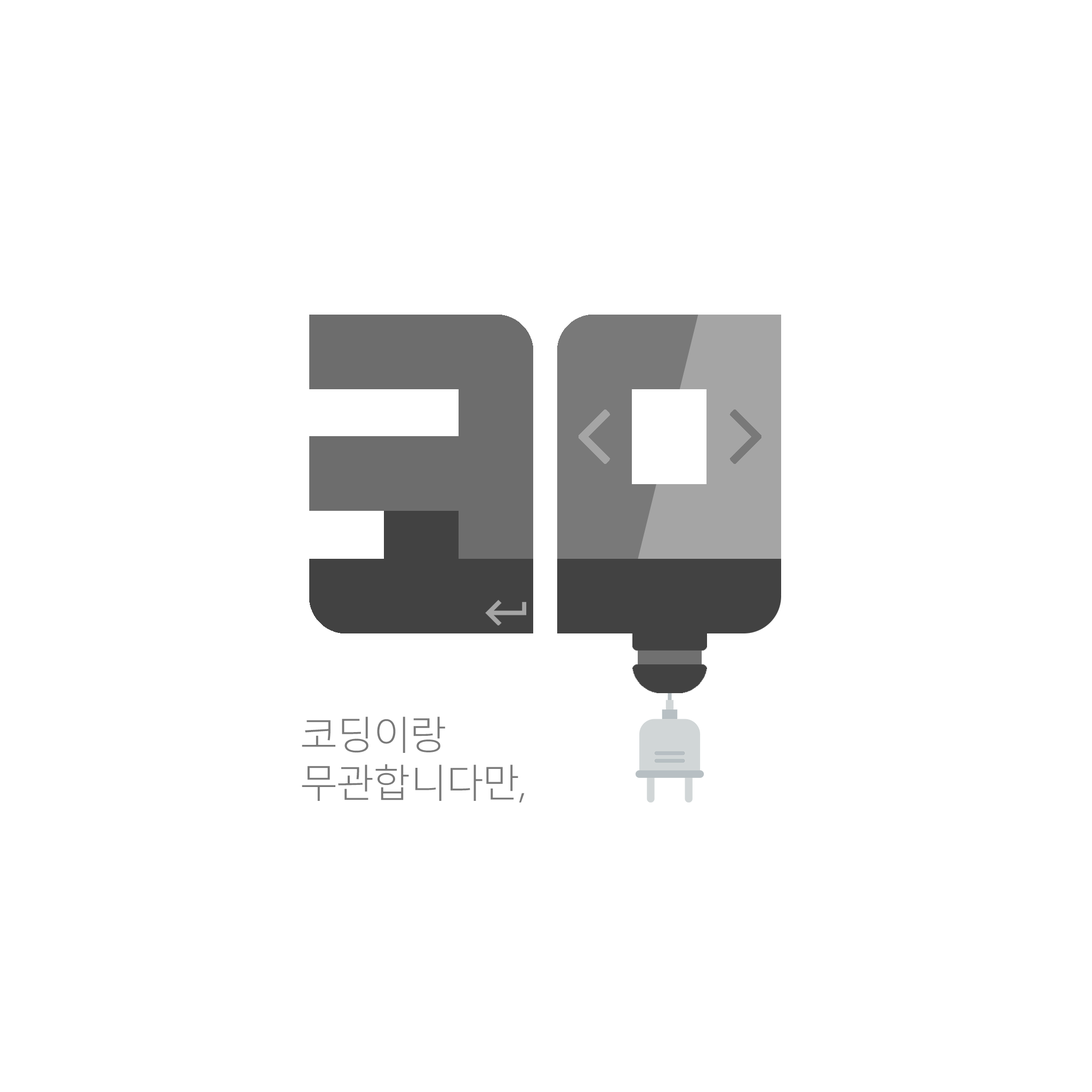
<style>
.page{position:relative;width:1092px;height:1092px;background:#ffffff}
.page>*{position:absolute;margin:0}
.t1{font:38.4px/48px "MalgunGothic-Semilight";letter-spacing:-0.05em;color:#797979}
</style>
<div class="page">
<p class="t1" style="left:302px;top:717px;width:223px;height:85px;text-align:right">코딩이랑<br>무관합니다만,</p>
</div>
